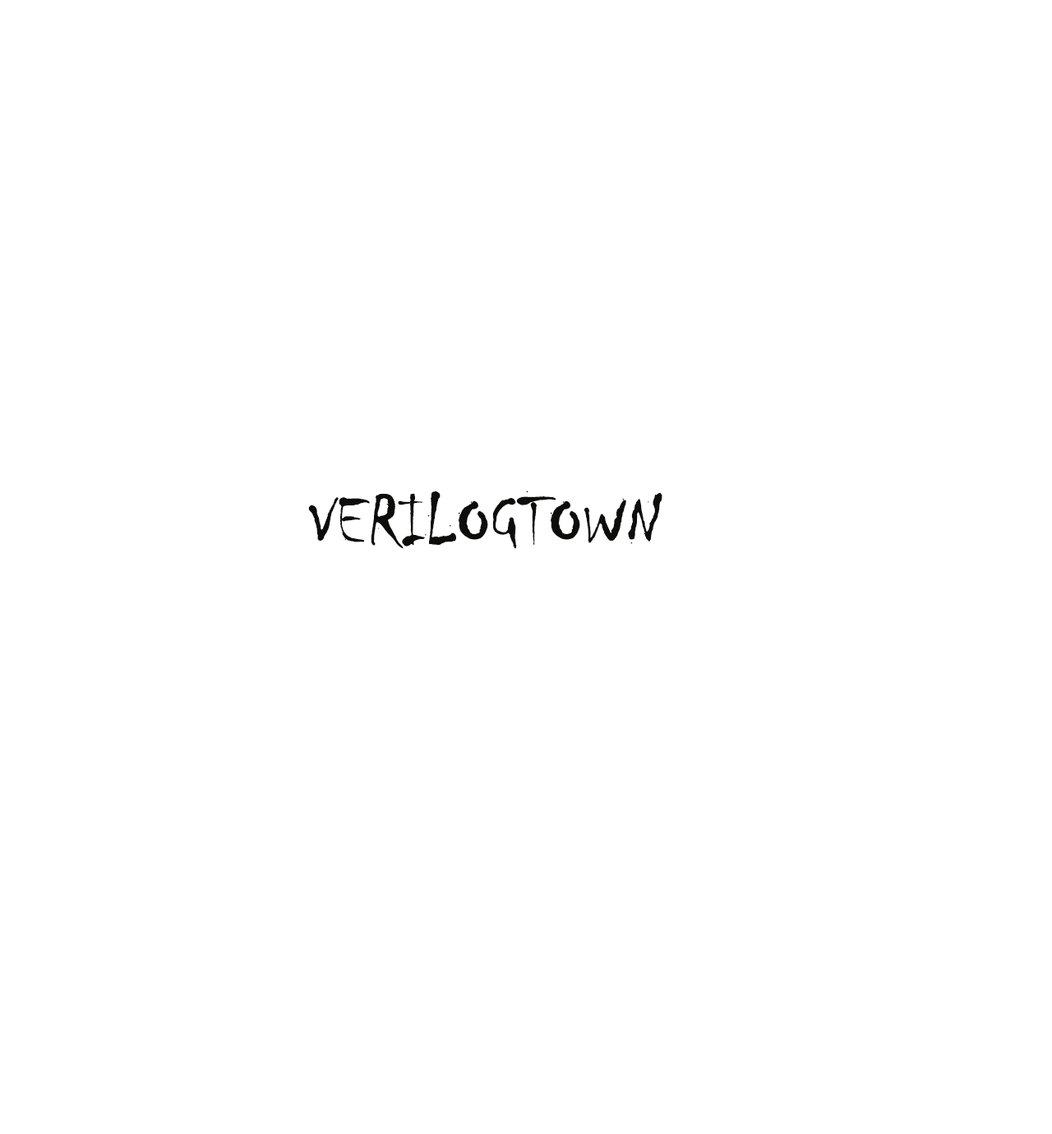
<style>
.page{position:relative;width:1052px;height:1134px;background:#ffffff}
.page>*{position:absolute;margin:0}
.t1{font:73.9px "Chiller-Regular";color:#0d0d0c}
</style>
<div class="page">
<p class="t1" style="left:308px;top:491px;width:354px;height:58px">VERILOGTOWN</p>
</div>
